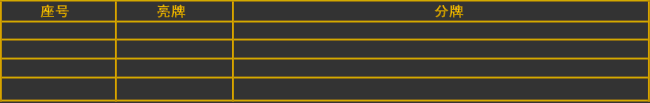
<style>
.page{position:relative;width:650px;height:103px;background:#333333}
.page>*{position:absolute;margin:0}
.t1{font:14px "SimHei";color:#c79f00;font-weight:bold;scale:1.03 1}
.t2{font:14px "SimHei";color:#ca9f00;font-weight:bold;scale:1.03 1}
.t3{font:14px "SimHei";color:#c49f00;font-weight:bold;scale:1.03 1}
</style>
<div class="page">
<p class="t1" style="left:40px;top:4px;width:29px;height:14px">座号</p>
<p class="t2" style="left:157px;top:4px;width:29px;height:14px">亮牌</p>
<p class="t3" style="left:434px;top:4px;width:30px;height:14px">分牌</p>
</div>
